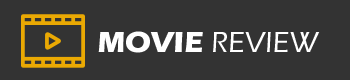
<style>
.page{position:relative;width:350px;height:80px;background:#333333}
.page>*{position:absolute;margin:0}
.t1{font:30px "ErasITC-Medium";color:#ffffff}
.t2{font:30px "ErasITC-Bold";color:#ffffff}
</style>
<div class="page">
<p class="t1" style="left:98px;top:31px;width:222px;height:22px"><span class="t2">MOVIE </span>REVIEW</p>
</div>
